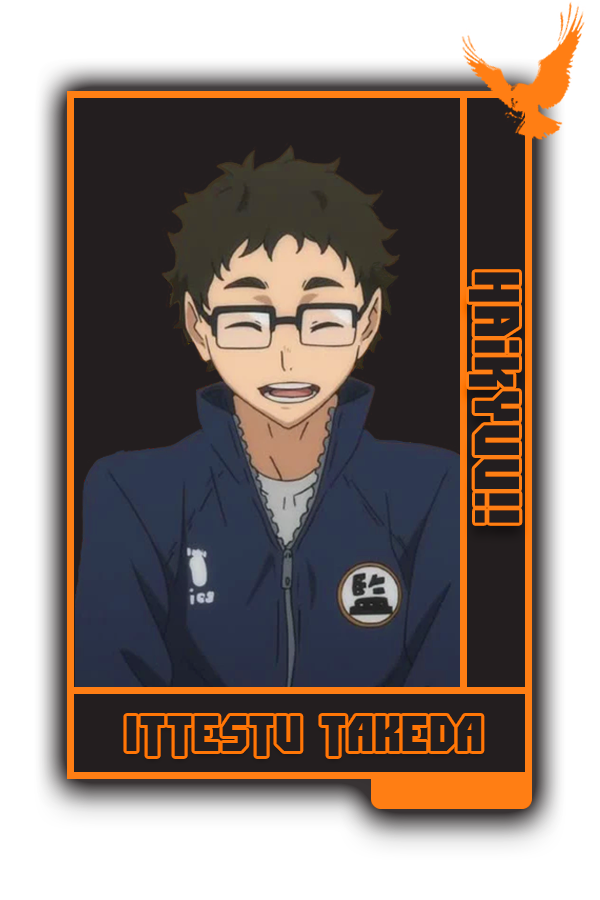
<style>
.page{position:relative;width:600px;height:900px;background:#231e1f}
.page>*{position:absolute;margin:0}
.t1{font:62.9px "Dimitri";color:#231f20}
.t2{font:50.5px "Dimitri";color:#231f20}
</style>
<div class="page">
<p class="t1" style="left:469px;top:272px;width:51px;height:251px;rotate:90deg">Haikyuu!!</p>
<p class="t2" style="left:126px;top:716px;width:356px;height:40px">ITTESTU TAKEDA</p>
</div>
